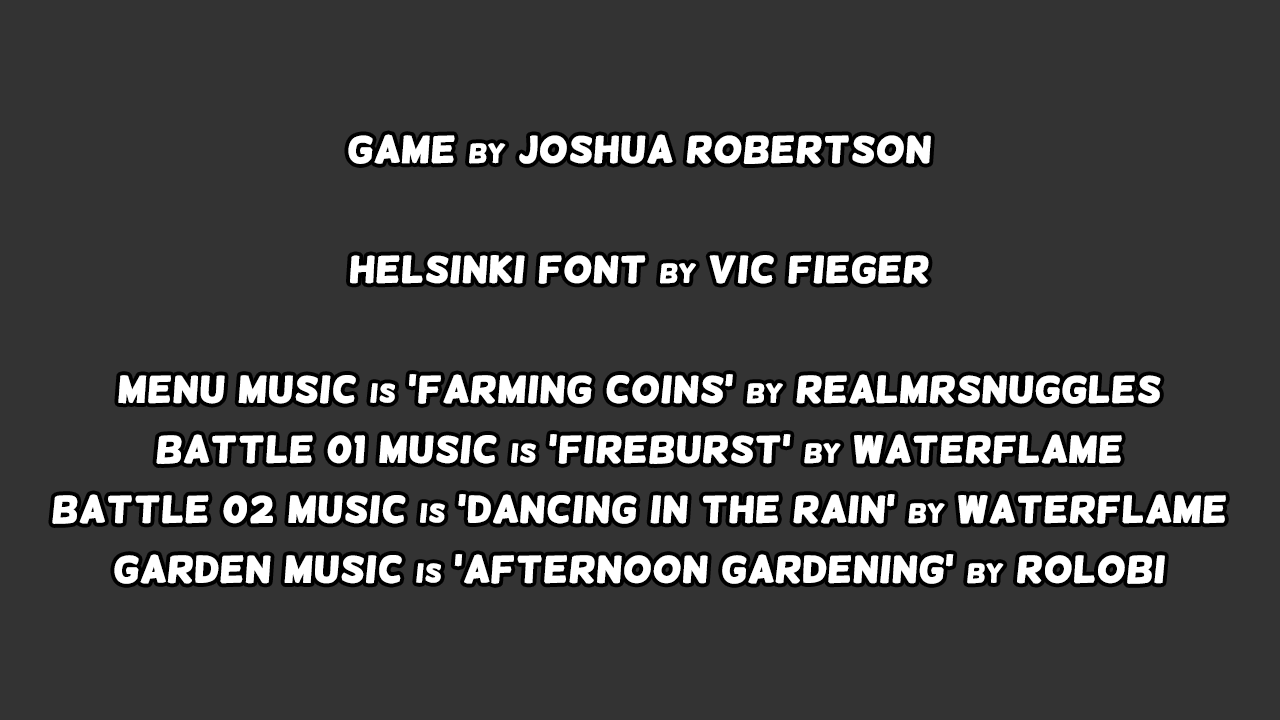
<style>
.page{position:relative;width:1280px;height:720px;background:#333333}
.page>*{position:absolute;margin:0}
.t1{font:36px/60px "Helsinki";color:#ffffff;font-variant:small-caps;font-weight:bold;scale:1.11 1}
</style>
<div class="page">
<p class="t1" style="left:52px;top:134px;width:1174px;height:450px;text-align:center">GAME by JOSHUA ROBERTSON<br><br>HELSINKI FONT by VIC FIEGER<br><br>MENU MUSIC is 'FARMING COINS' by REALMRSNUGGLES<br>BATTLE 01 MUSIC is 'FIREBURST' by WATERFLAME<br>BATTLE 02 MUSIC is 'DANCING IN THE RAIN' by WATERFLAME<br>GARDEN MUSIC is 'AFTERNOON GARDENING' by ROLOBI</p>
</div>
